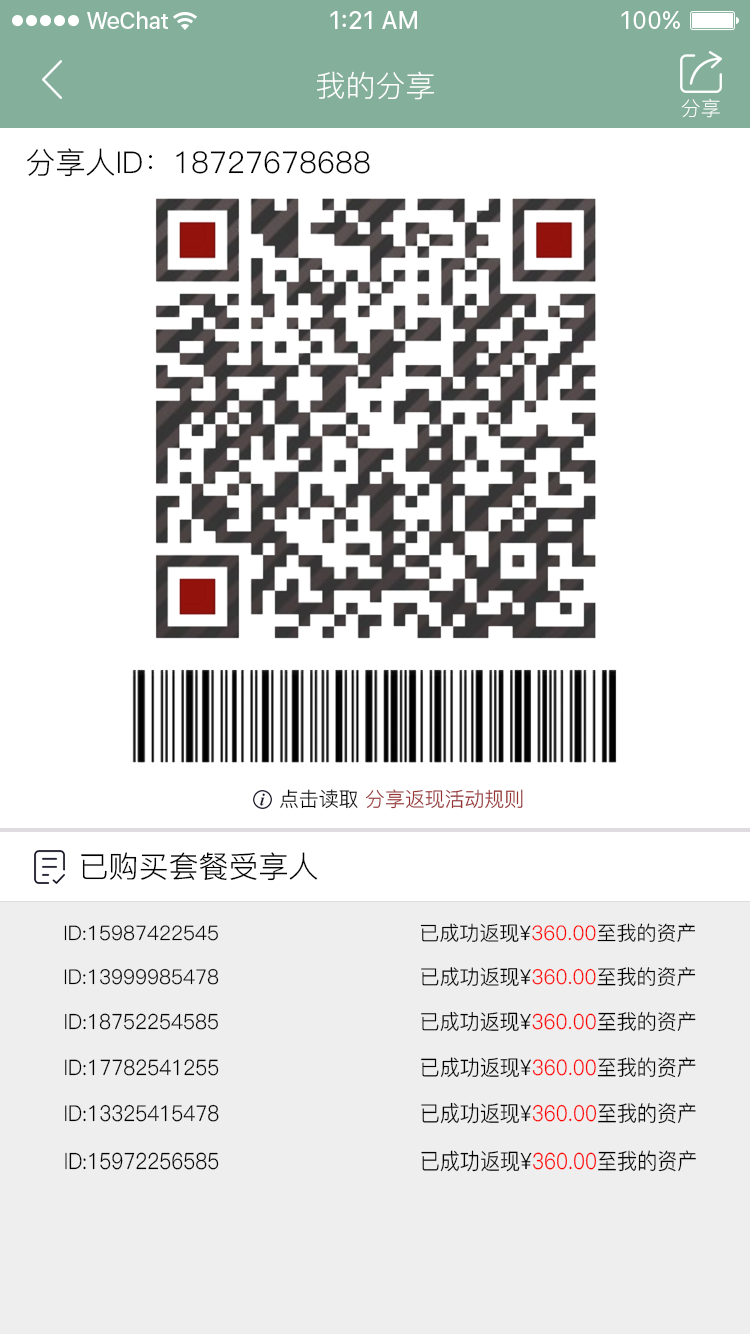
<style>
.page{position:relative;width:750px;height:1334px;background:#ffffff}
.page>*{position:absolute;margin:0}
.t1{font:30px "PingFang-SC-Regular";color:#ffffff;text-transform:uppercase}
.t2{font:20px "PingFang-SC-Regular";color:#ffffff;text-transform:uppercase}
.t3{font:30px "PingFang-SC-Regular";color:#000000}
.t4{font:20px "PingFang-SC-Regular";color:#983131}
.t5{font:20px "PingFang-SC-Regular";color:#000000}
.t6{font:20.5px "PingFang-SC-Regular";color:#000000}
.t7{font:20.9px "PingFang-SC-Regular";color:#000000;scale:0.96 1}
.t8{font:20.9px "PingFang-SC-Regular";color:#ff0000;scale:0.96 1}
.t9{font:21.4px "PingFang-SC-Regular";color:#000000;scale:0.94 1}
.t10{font:21.4px "PingFang-SC-Regular";color:#ff0000;scale:0.94 1}
.t11{font:21.9px "PingFang-SC-Regular";color:#000000;scale:0.91 1}
.t12{font:22.4px "PingFang-SC-Regular";color:#000000;scale:0.89 1}
</style>
<div class="page">
<p class="t1" style="left:317px;top:71px;width:117px;height:29px">我的分享</p>
<p class="t2" style="left:681px;top:99px;width:39px;height:19px">分享</p>
<p class="t3" style="left:27px;top:148px;width:343px;height:29px">分享人ID：18727678688</p>
<p class="t4" style="left:280px;top:789px;width:243px;height:20px"><span class="t5">点击读取 </span>分享返现活动规则</p>
<p class="t3" style="left:81px;top:852px;width:237px;height:29px">已购买套餐受享人</p>
<p class="t5" style="left:64px;top:925px;width:154px;height:16px">ID:15987422545</p>
<p class="t5" style="left:420px;top:923px;width:276px;height:19px">已成功返现¥360.00至我的资产</p>
<p class="t6" style="left:421px;top:966px;width:275px;height:21px">已成功返现¥360.00至我的资产</p>
<p class="t6" style="left:64px;top:968px;width:155px;height:17px">ID:13999985478</p>
<p class="t7" style="left:65px;top:1013px;width:153px;height:17px">ID:18752254585</p>
<p class="t7" style="left:421px;top:1011px;width:275px;height:21px">已成功返现¥<span class="t8">360.00</span>至我的资产</p>
<p class="t9" style="left:65px;top:1059px;width:154px;height:17px">ID:17782541255</p>
<p class="t9" style="left:421px;top:1057px;width:275px;height:21px">已成功返现¥<span class="t10">360.00</span>至我的资产</p>
<p class="t11" style="left:65px;top:1104px;width:154px;height:18px">ID:13325415478</p>
<p class="t11" style="left:421px;top:1102px;width:275px;height:22px">已成功返现¥360.00至我的资产</p>
<p class="t12" style="left:65px;top:1152px;width:154px;height:18px">ID:15972256585</p>
<p class="t12" style="left:421px;top:1150px;width:275px;height:22px">已成功返现¥360.00至我的资产</p>
</div>
